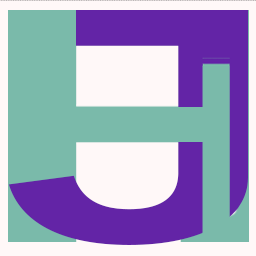
<style>
.page{position:relative;width:256px;height:256px;background:#7abaaa}
.page>*{position:absolute;margin:0}
.t1{font:331.5px "IBMPlexMono-SemiBold";letter-spacing:0.22em;color:#6324a6;scale:1.59 1}
</style>
<div class="page">
<p class="t1" style="left:8px;top:10px;width:240px;height:235px">J</p>
</div>
